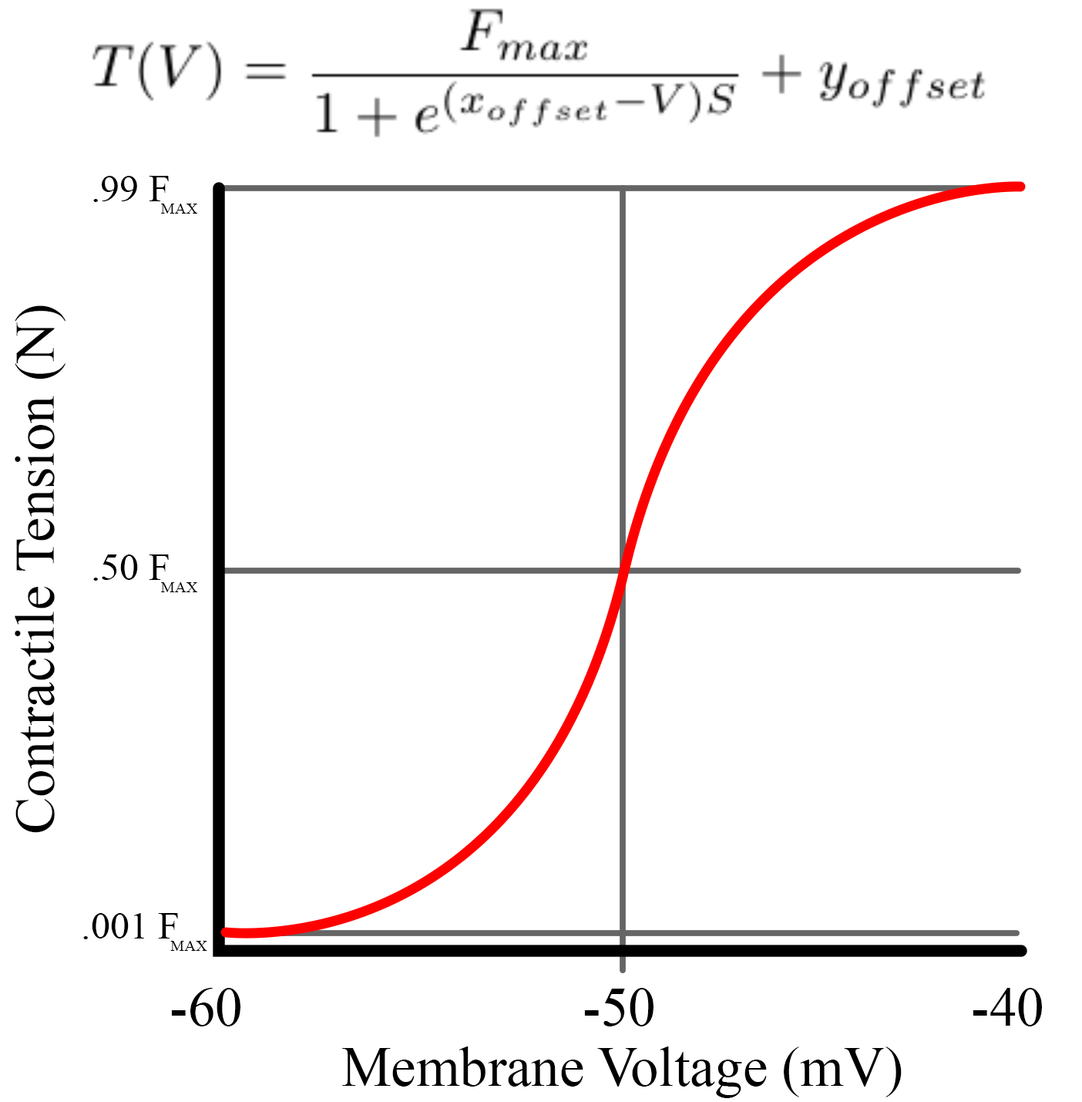
<style>
.page{position:relative;width:1082px;height:1102px;background:#ffffff}
.page>*{position:absolute;margin:0}
.t1{font:38.5px "TimesNewRomanPSMT";color:#000000}
.t2{font:38.5px "TimesNewRomanPSMT";letter-spacing:-0.24em;color:#000000}
.t3{font:38.5px "TimesNewRomanPSMT";color:#000000;font-variant:small-caps}
.t4{font:56.1px "TimesNewRomanPSMT";color:#000000}
.t5{font:54.6px "TimesNewRomanPSMT";color:#000000}
</style>
<div class="page">
<p class="t1" style="left:93px;top:176px;width:104px;height:38px">.99 <span class="t2">F</span><span class="t3">max</span></p>
<p class="t4" style="left:15px;top:305px;width:51px;height:528px;rotate:-90deg">Contractile Tension (N)</p>
<p class="t1" style="left:93px;top:554px;width:104px;height:38px">.50 <span class="t2">F</span><span class="t3">max</span></p>
<p class="t1" style="left:83px;top:913px;width:124px;height:38px">.001 <span class="t2">F</span><span class="t3">max</span></p>
<p class="t5" style="left:171px;top:988px;width:70px;height:38px">-60</p>
<p class="t5" style="left:584px;top:988px;width:70px;height:38px">-50</p>
<p class="t5" style="left:973px;top:988px;width:69px;height:38px">-40</p>
<p class="t4" style="left:342px;top:1046px;width:560px;height:52px">Membrane Voltage (mV)</p>
</div>
